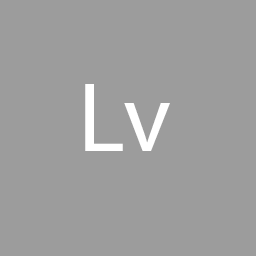
<style>
.page{position:relative;width:256px;height:256px;background:#9c9c9c}
.page>*{position:absolute;margin:0}
.t1{font:100px "MyriadPro-Regular";color:#ffffff}
</style>
<div class="page">
<p class="t1" style="left:85px;top:84px;width:85px;height:67px">Lv</p>
</div>
